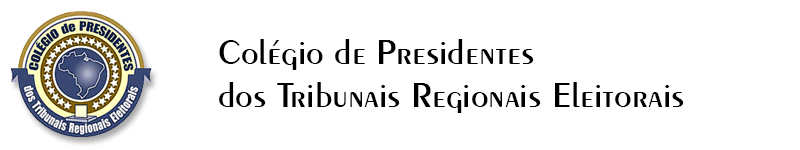
<style>
.page{position:relative;width:800px;height:150px;background:#ffffff}
.page>*{position:absolute;margin:0}
.t1{font:36px "Exotic350BT-DemiBold";color:#000000}
</style>
<div class="page">
<p class="t1" style="left:219px;top:39px;width:465px;height:74px">Colégio de Presidentes<br>dos Tribunais Regionais Eleitorais</p>
</div>
